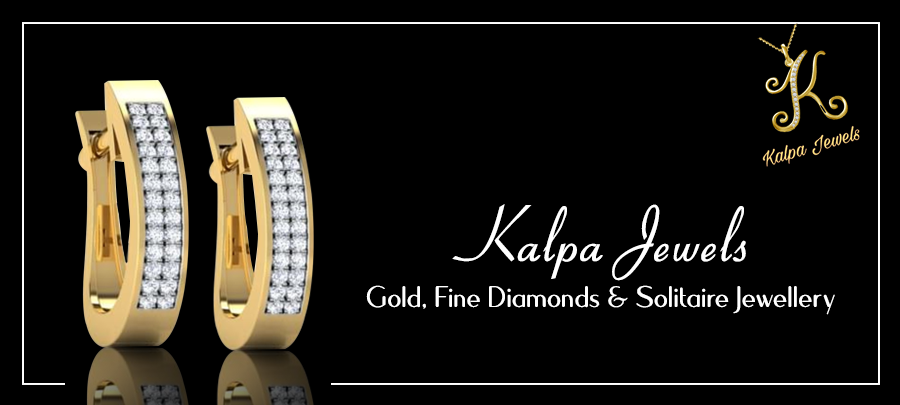
<style>
.page{position:relative;width:900px;height:405px;background:#000000}
.page>*{position:absolute;margin:0}
.t1{font:80px "Aspire-DemiBold";color:#ffffff}
.t2{font:40px "Quesha";color:#ffffff}
</style>
<div class="page">
<p class="t1" style="left:452px;top:204px;width:294px;height:77px">Kalpa Jewels</p>
<p class="t2" style="left:366px;top:285px;width:469px;height:30px">Gold, Fine Diamonds &amp; Solitaire Jewellery</p>
</div>
